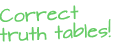
<style>
.page{position:relative;width:120px;height:48px;background:#ffffff}
.page>*{position:absolute;margin:0}
.t1{font:16px "ArchitectsDaughter";color:#66cc66}
</style>
<div class="page">
<p class="t1" style="left:0px;top:5px;width:111px;height:37px">Correct<br>truth tables!</p>
</div>
